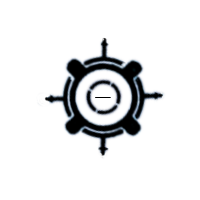
<style>
.page{position:relative;width:200px;height:200px;background:#ffffff}
.page>*{position:absolute;margin:0}
.t1{font:36px "LiSu";color:#000000}
</style>
<div class="page">
<p class="t1" style="left:95px;top:97px;width:16px;height:1px">-</p>
</div>
